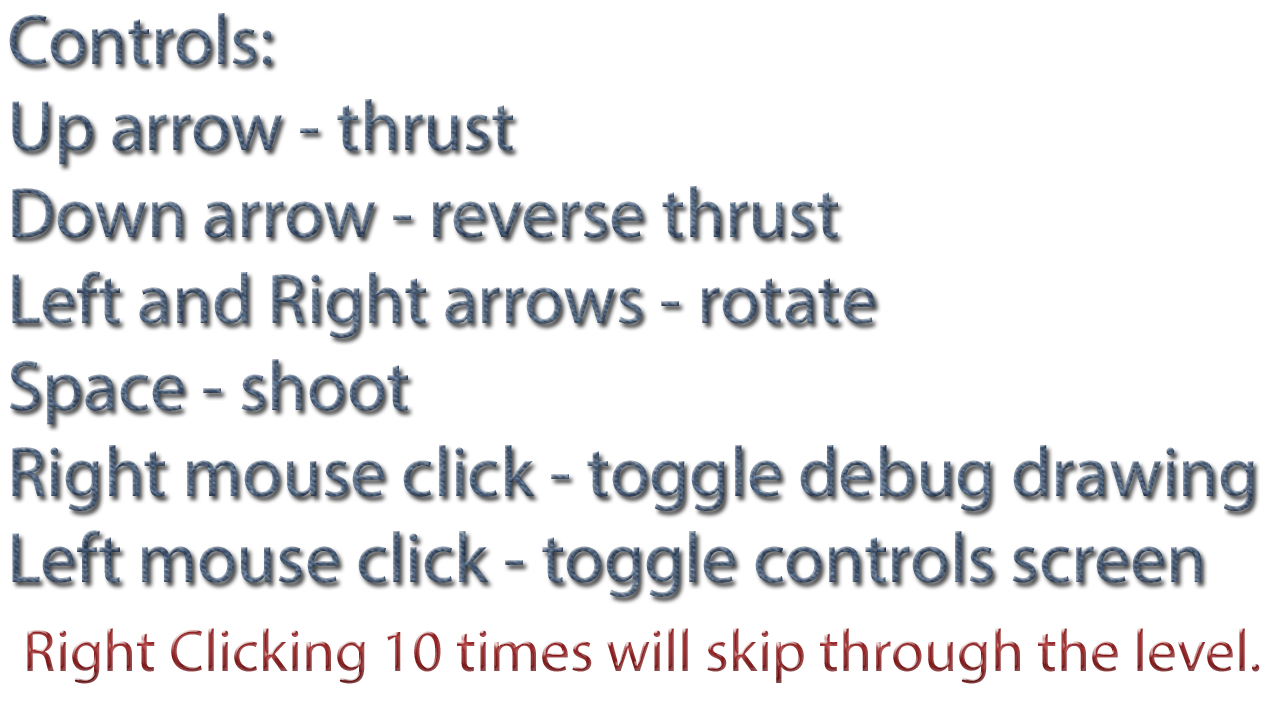
<style>
.page{position:relative;width:1280px;height:720px;background:#ffffff}
.page>*{position:absolute;margin:0}
.t1{font:72px "MyriadPro-Regular"}
.t2{font:60px "MyriadPro-Regular"}
</style>
<div class="page">
<p class="t1" style="left:9px;top:13px;width:1245px;height:584px">Controls:<br>Up arrow - thrust<br>Down arrow - reverse thrust<br>Left and Right arrows - rotate<br>Space - shoot<br>Right mouse click - toggle debug drawing<br>Left mouse click - toggle controls screen</p>
<p class="t2" style="left:27px;top:628px;width:1233px;height:56px">Right Clicking 10 times will skip through the level.</p>
</div>
